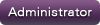
<style>
.page{position:relative;width:100px;height:25px}
.page>*{position:absolute;margin:0}
.t1{font:12px "UniversLT-Extended";color:#ffffff;font-weight:bold;scale:0.85 1}
</style>
<div class="page">
<p class="t1" style="left:8px;top:7px;width:84px;height:10px">Administrator</p>
</div>
